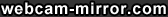
<style>
.page{position:relative;width:168px;height:17px;background:#000000}
.page>*{position:absolute;margin:0}
.t1{font:16px "Arial-BoldMT";letter-spacing:0.05em;color:#ffffff}
</style>
<div class="page">
<p class="t1" style="left:1px;top:2px;width:165px;height:13px">webcam-mirror.com</p>
</div>
